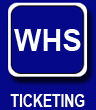
<style>
.page{position:relative;width:96px;height:110px;background:#050989}
.page>*{position:absolute;margin:0}
.t1{font:30px "Arial-BoldMT";color:#feffff}
.t2{font:18.5px "Arial-BoldMT";color:#feffff;scale:0.75 1}
</style>
<div class="page">
<p class="t1" style="left:14px;top:29px;width:67px;height:22px">WHS</p>
<p class="t2" style="left:10px;top:94px;width:75px;height:13px">TICKETING</p>
</div>
